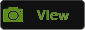
<style>
.page{position:relative;width:85px;height:30px;background:#111111}
.page>*{position:absolute;margin:0}
.t1{font:14px "Helvetica-Bold";letter-spacing:0.025em;color:#5b8b17}
</style>
<div class="page">
<p class="t1" style="left:36px;top:10px;width:33px;height:10px">View</p>
<p class="t1" style="left:36px;top:10px;width:33px;height:10px">View</p>
</div>
